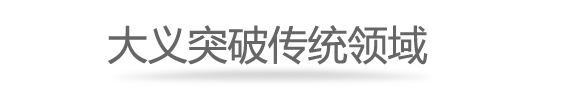
<style>
.page{position:relative;width:566px;height:100px;background:#ffffff}
.page>*{position:absolute;margin:0}
.t1{font:40px "MicrosoftYaHei";color:#666666}
</style>
<div class="page">
<p class="t1" style="left:108px;top:25px;width:320px;height:40px">大义突破传统领域</p>
</div>
